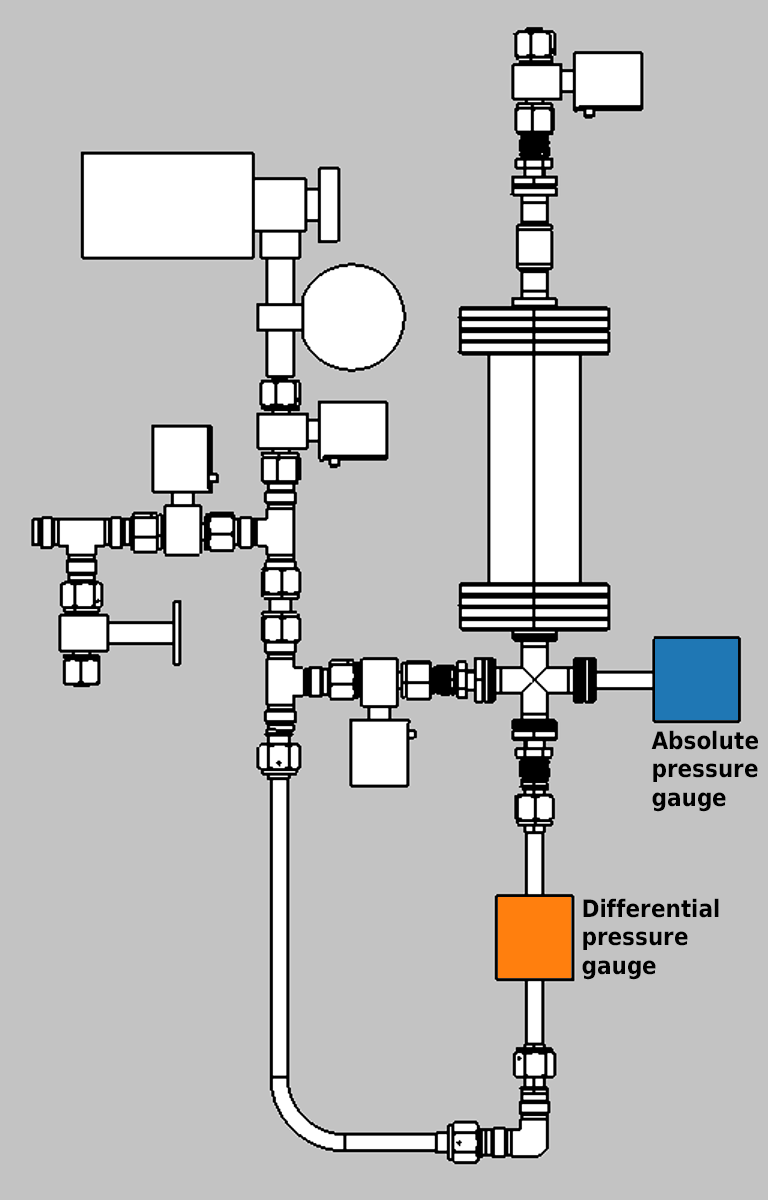
<style>
.page{position:relative;width:768px;height:1200px;background:#c3c3c3}
.page>*{position:absolute;margin:0}
.t1{font:24px "DejaVuSansCondensed-Bold";color:#000000}
</style>
<div class="page">
<p class="t1" style="left:651px;top:730px;width:107px;height:82px">Absolute<br>pressure<br>gauge</p>
<p class="t1" style="left:582px;top:898px;width:137px;height:82px">Differential<br>pressure<br>gauge</p>
</div>
